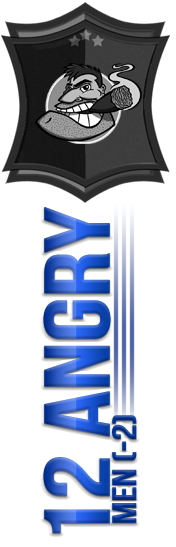
<style>
.page{position:relative;width:176px;height:547px;background:#ffffff}
.page>*{position:absolute;margin:0}
.t1{font:92px "BebasNeue";letter-spacing:-0.03em;font-weight:bold;scale:1.25 1}
.t2{font:33.6px "BebasNeue";letter-spacing:-0.03em;font-weight:bold;scale:1.25 1}
</style>
<div class="page">
<p class="t1" style="left:43px;top:207px;width:68px;height:326px;rotate:-90deg">12 ANGRY</p>
<p class="t2" style="left:112px;top:415px;width:25px;height:108px;rotate:-90deg">MEN (-2)</p>
</div>
